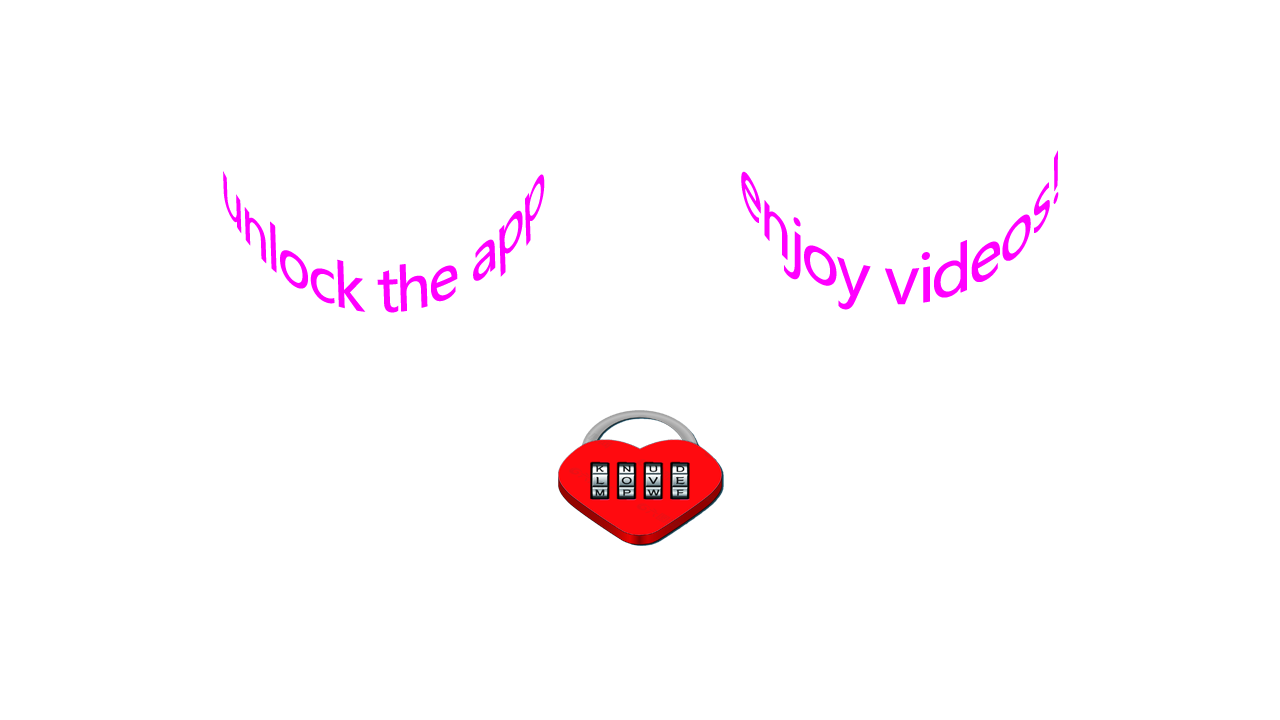
<style>
.page{position:relative;width:1280px;height:720px;background:#ffffff}
.page>*{position:absolute;margin:0}
.t1{font:62.3px/145.9px "MicrosoftYaHeiUI";letter-spacing:-0.04em;color:#ff00ff;scale:0.89 1}
.t2{font:58.4px "MicrosoftYaHeiUI";letter-spacing:-0.04em;color:#ff00ff;scale:0.83 1}
</style>
<div class="page">
<p class="t1" style="left:741px;top:150px;width:318px;height:160px;text-align:center">enjoy videos!</p>
<p class="t2" style="left:223px;top:171px;width:322px;height:142px;rotate:-3deg">unlock the app</p>
</div>
